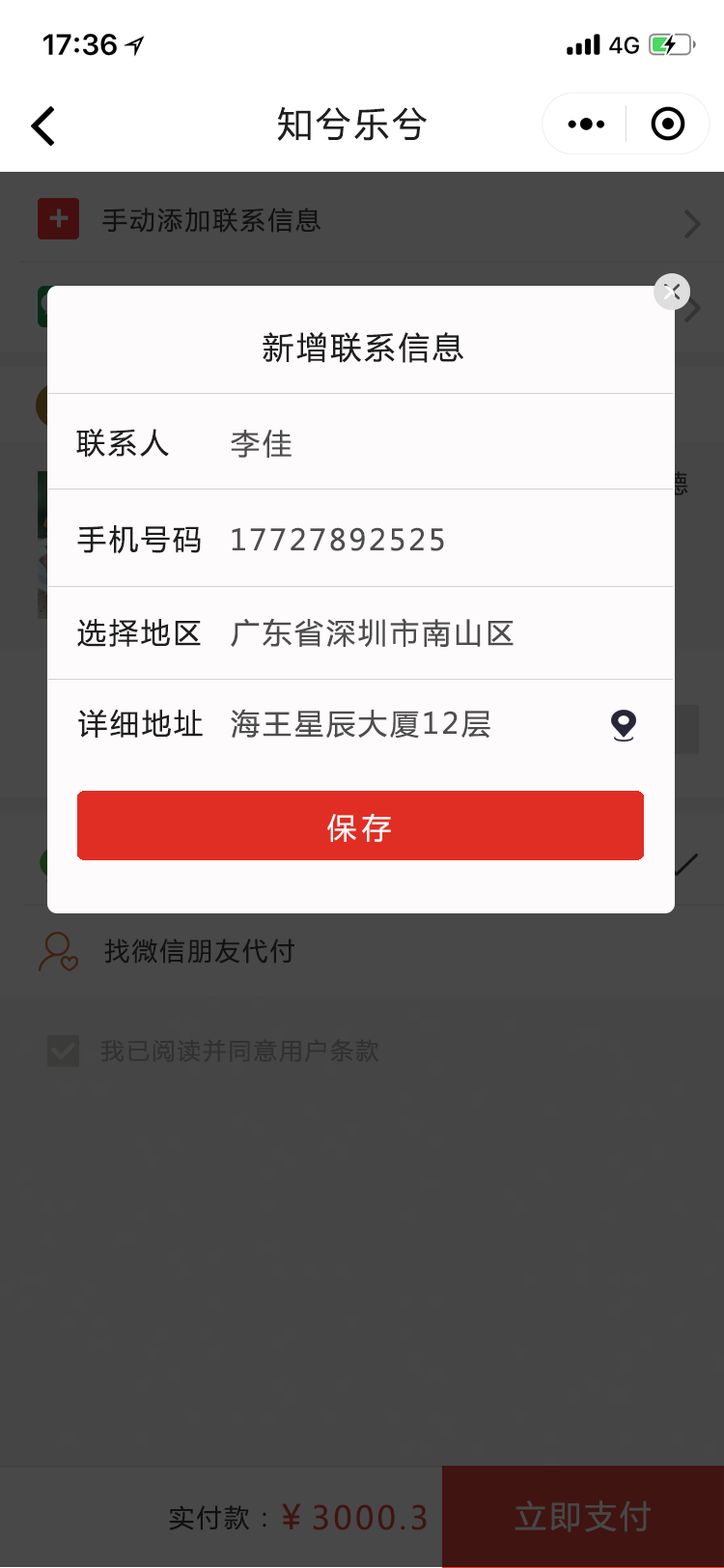
<style>
.page{position:relative;width:724px;height:1568px;background:#454545}
.page>*{position:absolute;margin:0}
.t1{font:34.8px "MicrosoftYaHei";letter-spacing:0.1em;color:#201f20}
.t2{font:34.8px "MicrosoftYaHei-Bold";letter-spacing:0.1em;color:#474747}
.t3{font:25.1px "MicrosoftYaHei";letter-spacing:0.1em;color:#282727}
.t4{font:30.9px "MicrosoftYaHei";letter-spacing:0.1em;color:#1f1e1e}
.t5{font:29px "MicrosoftYaHei";letter-spacing:0.1em;color:#1f1e1e}
.t6{font:29px "MicrosoftYaHei";letter-spacing:0.1em;color:#4e4d4d}
.t7{font:29px "MicrosoftYaHei";letter-spacing:0.2em;color:#fcf8f8}
.t8{font:23.2px "MicrosoftYaHei";letter-spacing:0.1em;color:#313131}
.t9{font:25.1px "MicrosoftYaHei";letter-spacing:0.1em;color:#1e1d1d}
.t10{font:31.9px "MicrosoftYaHei";letter-spacing:0.1em;color:#401411}
.t11{font:33.8px "MicrosoftYaHei";letter-spacing:0.1em;color:#401411}
.t12{font:31.9px "MicrosoftYaHei";letter-spacing:0.1em;color:#484747}
</style>
<div class="page">
<p class="t1" style="left:277px;top:106px;width:150px;height:35px">知兮乐兮</p>
<p class="t2" style="left:49px;top:209px;width:20px;height:19px">+</p>
<p class="t3" style="left:102px;top:208px;width:220px;height:25px">手动添加联系信息</p>
<p class="t4" style="left:263px;top:332px;width:200px;height:31px">新增联系信息</p>
<p class="t5" style="left:76px;top:429px;width:93px;height:28px">联系人</p>
<p class="t6" style="left:231px;top:429px;width:61px;height:29px">李佳</p>
<p class="t5" style="left:77px;top:525px;width:124px;height:29px">手机号码</p>
<p class="t6" style="left:232px;top:527px;width:212px;height:24px">17727892525</p>
<p class="t6" style="left:231px;top:618px;width:283px;height:30px">广东省深圳市南山区</p>
<p class="t5" style="left:77px;top:619px;width:124px;height:28px">选择地区</p>
<p class="t5" style="left:78px;top:709px;width:125px;height:29px">详细地址</p>
<p class="t6" style="left:231px;top:709px;width:259px;height:30px">海王星辰大厦12层</p>
<p class="t7" style="left:327px;top:813px;width:64px;height:29px">保存</p>
<p class="t3" style="left:104px;top:938px;width:190px;height:26px">找微信朋友代付</p>
<p class="t8" style="left:100px;top:1039px;width:279px;height:24px">我已阅读并同意用户条款</p>
<p class="t9" style="left:169px;top:1505px;width:97px;height:25px">实付款：</p>
<p class="t10" style="left:282px;top:1503px;width:145px;height:27px"><span class="t11">￥</span>3000.3</p>
<p class="t12" style="left:515px;top:1500px;width:136px;height:32px">立即支付</p>
</div>
